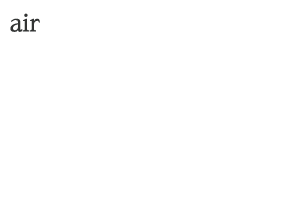
<style>
.page{position:relative;width:300px;height:200px;background:#ffffff}
.page>*{position:absolute;margin:0}
.t1{font:24px "SawarabiMincho-Medium";color:#323433}
</style>
<div class="page">
<p class="t1" style="left:10px;top:13px;width:30px;height:19px">air</p>
</div>
